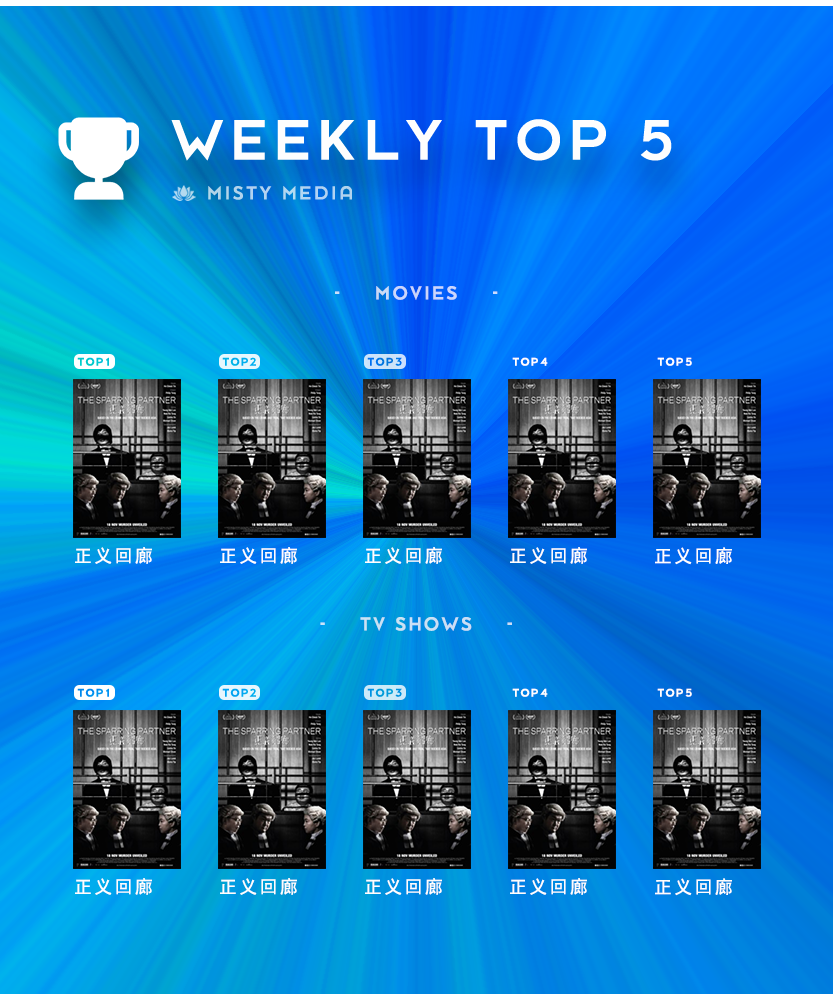
<style>
.page{position:relative;width:833px;height:1000px}
.page>*{position:absolute;margin:0}
.t1{font:62.9px "DessauPro";letter-spacing:0.126em;color:#fefefe}
.t2{font:21px "DessauPro";letter-spacing:0.126em;color:#b2d3f1;scale:0.97 1}
.t3{font:21px "DessauPro";letter-spacing:0.126em;color:#cad7fb;scale:0.97 1}
.t4{font:12.1px "DessauPro";letter-spacing:0.126em;color:#ffffff}
.t5{font:18px "SimHei";letter-spacing:0.126em;color:#fefefe}
.t6{font:21px "DessauPro";letter-spacing:0.126em;color:#cae0f5;scale:0.97 1}
</style>
<div class="page">
<p class="t1" style="left:171px;top:119px;width:501px;height:42px">WEEKLY TOP 5</p>
<p class="t2" style="left:208px;top:186px;width:144px;height:14px">MISTY MEDIA</p>
<p class="t3" style="left:335px;top:286px;width:163px;height:14px">-    MOVIES    -</p>
<p class="t4" style="left:512px;top:357px;width:36px;height:9px">TOP 4</p>
<p class="t4" style="left:657px;top:357px;width:35px;height:9px">TOP 5</p>
<p class="t5" style="left:75px;top:547px;width:77px;height:17px">正义回廊</p>
<p class="t5" style="left:220px;top:547px;width:77px;height:17px">正义回廊</p>
<p class="t5" style="left:365px;top:547px;width:77px;height:17px">正义回廊</p>
<p class="t5" style="left:510px;top:547px;width:77px;height:17px">正义回廊</p>
<p class="t5" style="left:655px;top:547px;width:77px;height:18px">正义回廊</p>
<p class="t6" style="left:320px;top:617px;width:192px;height:14px">-    TV SHOWS    -</p>
<p class="t4" style="left:512px;top:688px;width:36px;height:9px">TOP 4</p>
<p class="t4" style="left:657px;top:688px;width:35px;height:9px">TOP 5</p>
<p class="t5" style="left:75px;top:878px;width:77px;height:17px">正义回廊</p>
<p class="t5" style="left:220px;top:878px;width:77px;height:17px">正义回廊</p>
<p class="t5" style="left:365px;top:878px;width:77px;height:17px">正义回廊</p>
<p class="t5" style="left:510px;top:878px;width:77px;height:17px">正义回廊</p>
<p class="t5" style="left:655px;top:878px;width:77px;height:18px">正义回廊</p>
</div>
